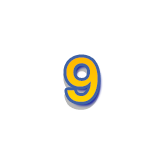
<style>
.page{position:relative;width:164px;height:164px;background:#ffffff}
.page>*{position:absolute;margin:0}
.t1{font:59.8px "PingFangHK-Semibold";color:#ffc500;text-transform:uppercase}
</style>
<div class="page">
<p class="t1" style="left:66px;top:57px;width:32px;height:45px">9</p>
</div>
